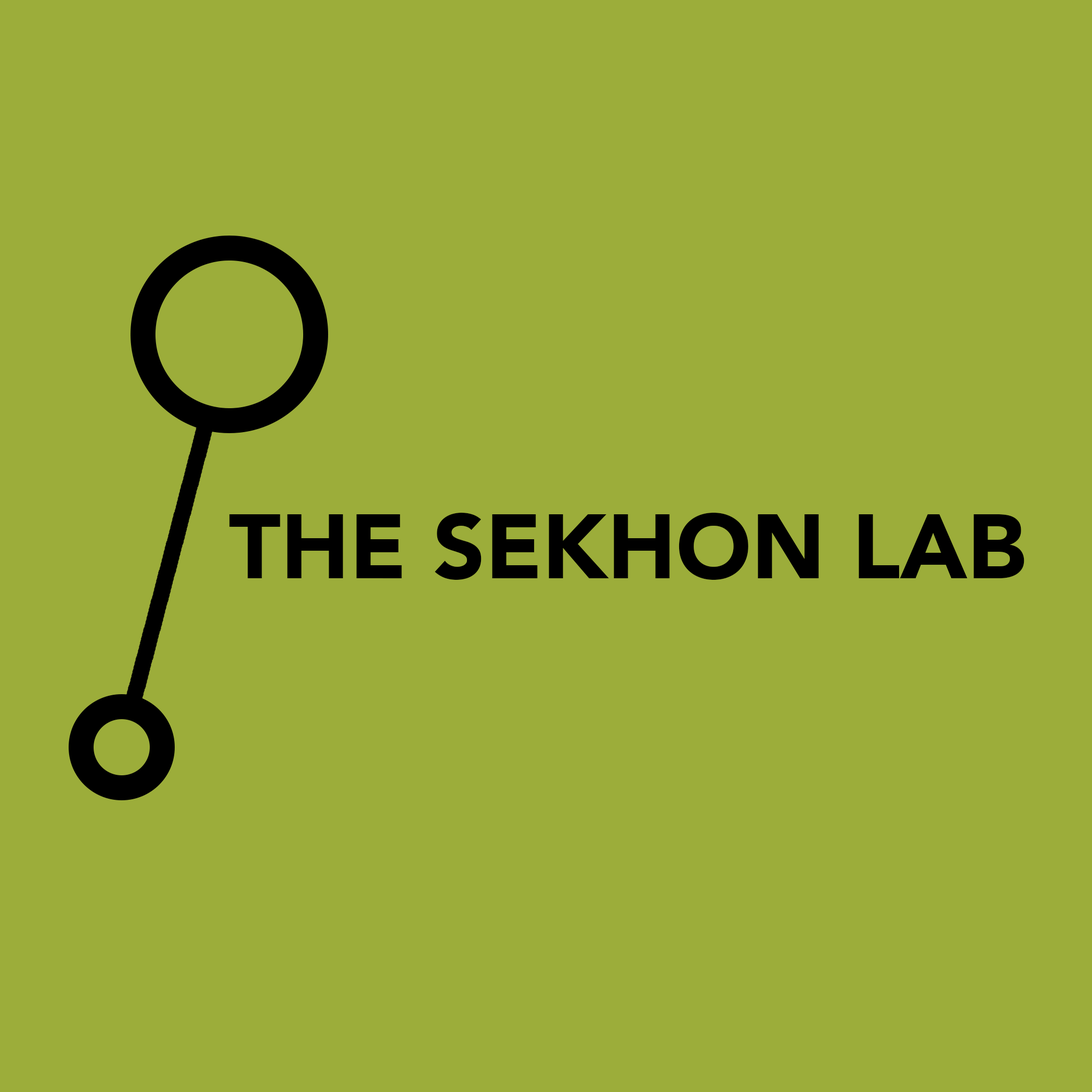
<style>
.page{position:relative;width:1092px;height:1092px;background:#9cad3a}
.page>*{position:absolute;margin:0}
.t1{font:90.4px "Avenir-Black";color:#000000}
</style>
<div class="page">
<p class="t1" style="left:229px;top:513px;width:795px;height:67px">THE SEKHON LAB</p>
</div>
